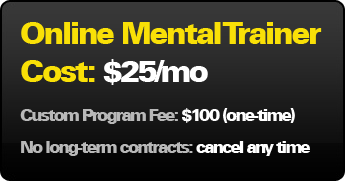
<style>
.page{position:relative;width:346px;height:182px}
.page>*{position:absolute;margin:0}
.t1{font:31px "UniversLT-Black";letter-spacing:-0.075em;color:#f9e007}
.t2{font:31px "UniversLT-Black";letter-spacing:-0.1em;color:#ffffff}
.t3{font:16.5px/39px "UniversLT-Black";letter-spacing:-0.1em;color:#b8b8b8}
.t4{font:16.5px/39px "UniversLT-Black";letter-spacing:-0.1em;color:#ffffff}
.t5{font:16.5px/32px "UniversLT-Black";letter-spacing:-0.1em;color:#b8b8b8}
.t6{font:16.5px/32px "UniversLT-Black";letter-spacing:-0.1em;color:#ffffff}
</style>
<div class="page">
<p class="t1" style="left:20px;top:22px;width:302px;height:134px">Online Mental Trainer Cost: <span class="t2">$25/mo<br></span><span class="t3">Custom Program Fee:</span><span class="t4"> $100 (one-time)<br></span><span class="t5">No long-term contracts:</span><span class="t6"> cancel any time</span></p>
</div>
